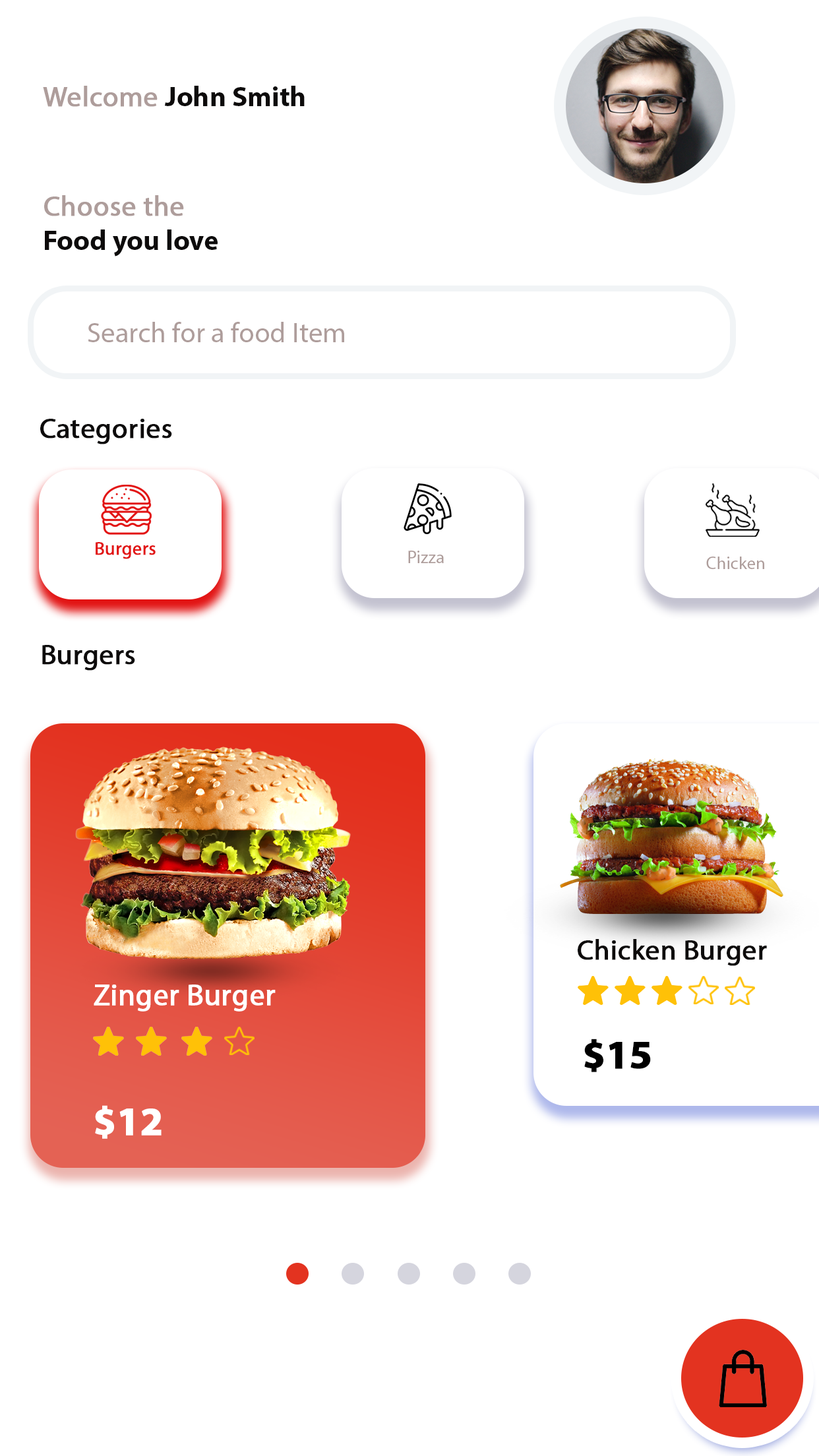
<style>
.page{position:relative;width:819px;height:1456px;background:#ffffff}
.page>*{position:absolute;margin:0}
.t1{font:28.4px "MyriadPro-Bold";color:#0d0b0b}
.t2{font:28.4px "MyriadPro-Regular";color:#ae9d9b;font-weight:bold}
.t3{font:28.4px "MyriadPro-Regular";color:#ae9d9b}
.t4{font:28.4px "MyriadPro-Regular";color:#0d0b0b;font-weight:bold}
.t5{font:18.3px "MyriadPro-Regular";color:#e21414;font-weight:bold}
.t6{font:17.8px "MyriadPro-Regular";color:#ae9d9b}
.t7{font:30px "MyriadPro-Regular";color:#ffffff;font-weight:bold}
.t8{font:40.2px "MyriadPro-Bold";color:#000000;font-weight:bold}
.t9{font:40.2px "MyriadPro-Bold";color:#ffffff;font-weight:bold}
</style>
<div class="page">
<p class="t1" style="left:43px;top:86px;width:262px;height:21px"><span class="t2">Welcome </span>John Smith</p>
<p class="t1" style="left:44px;top:195px;width:174px;height:62px"><span class="t2">Choose the <br></span>Food you love</p>
<p class="t3" style="left:88px;top:322px;width:256px;height:20px">Search for a food Item</p>
<p class="t4" style="left:40px;top:419px;width:132px;height:25px">Categories</p>
<p class="t5" style="left:96px;top:542px;width:60px;height:17px">Burgers</p>
<p class="t6" style="left:408px;top:551px;width:36px;height:12px">Pizza</p>
<p class="t6" style="left:706px;top:557px;width:58px;height:12px">Chicken</p>
<p class="t4" style="left:42px;top:645px;width:93px;height:26px">Burgers</p>
<p class="t4" style="left:578px;top:939px;width:189px;height:27px">Chicken Burger</p>
<p class="t7" style="left:94px;top:985px;width:182px;height:27px">Zinger Burger</p>
<p class="t8" style="left:584px;top:1039px;width:67px;height:33px">$15</p>
<p class="t9" style="left:95px;top:1105px;width:67px;height:34px">$12</p>
</div>
